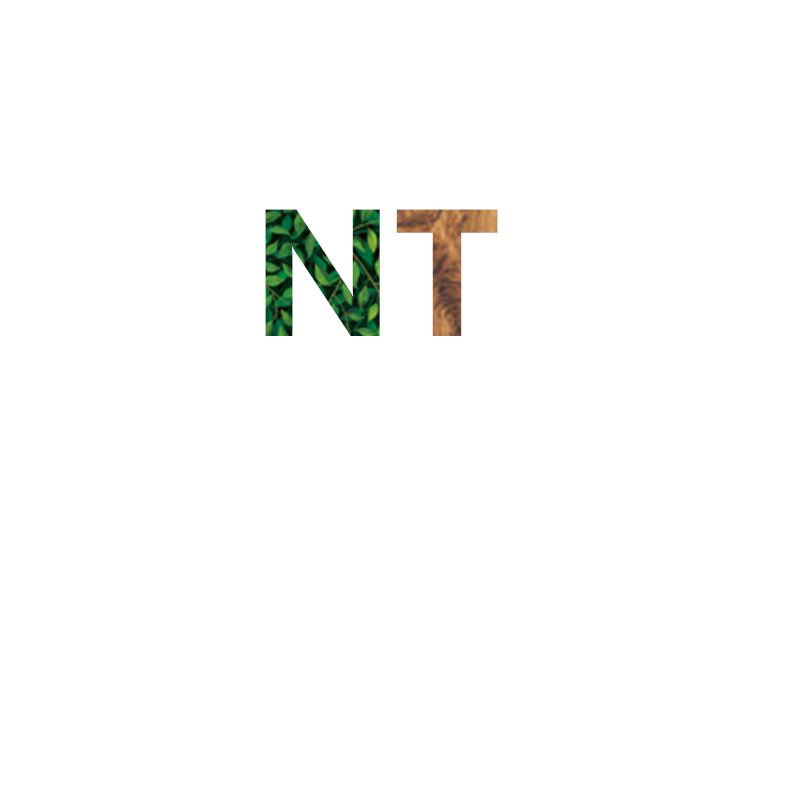
<style>
.page{position:relative;width:800px;height:800px;background:#ffffff}
.page>*{position:absolute;margin:0}
.t1{font:180.8px "LeelawadeeUI-Bold"}
</style>
<div class="page">
<p class="t1" style="left:265px;top:209px;width:233px;height:127px">NT</p>
</div>
